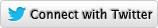
<style>
.page{position:relative;width:158px;height:28px}
.page>*{position:absolute;margin:0}
.t1{font:12px "LucidaSans";letter-spacing:0.005em;color:#000000}
</style>
<div class="page">
<p class="t1" style="left:31px;top:9px;width:122px;height:10px">Connect with Twitter</p>
</div>
